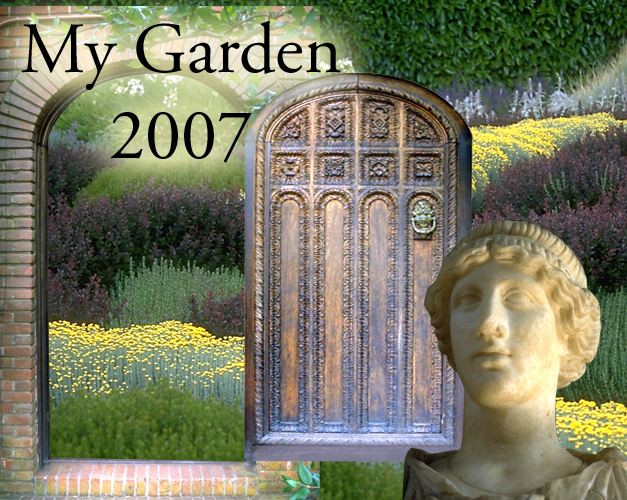
<style>
.page{position:relative;width:627px;height:500px}
.page>*{position:absolute;margin:0}
.t1{font:72px "AGaramondPro-Regular";color:#000000}
</style>
<div class="page">
<p class="t1" style="left:21px;top:20px;width:320px;height:143px;text-align:center">My Garden<br>2007</p>
</div>
